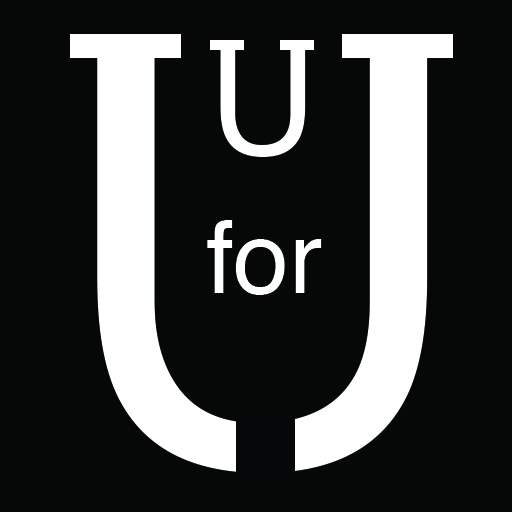
<style>
.page{position:relative;width:512px;height:512px;background:#060808}
.page>*{position:absolute;margin:0}
.t1{font:150px "Helvetica";color:#ffffff}
.t2{font:100px "Helvetica";color:#ffffff}
</style>
<div class="page">
<p class="t1" style="left:220px;top:46px;width:86px;height:111px">U</p>
<p class="t2" style="left:207px;top:220px;width:115px;height:75px">for</p>
</div>
